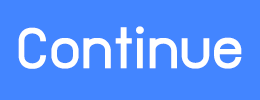
<style>
.page{position:relative;width:260px;height:100px;background:#4385ff}
.page>*{position:absolute;margin:0}
.t1{font:65px "supermarket";color:#ffffff;font-weight:bold}
</style>
<div class="page">
<p class="t1" style="left:18px;top:26px;width:224px;height:43px">Continue</p>
</div>
